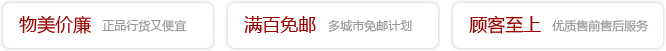
<style>
.page{position:relative;width:666px;height:51px;background:#ffffff}
.page>*{position:absolute;margin:0}
.t1{font:18px "MicrosoftYaHei";color:#990000}
.t2{font:12px "MicrosoftYaHei";color:#999999}
</style>
<div class="page">
<p class="t1" style="left:19px;top:15px;width:72px;height:19px">物美价廉</p>
<p class="t1" style="left:244px;top:16px;width:72px;height:17px">满百免邮</p>
<p class="t1" style="left:469px;top:15px;width:72px;height:19px">顾客至上</p>
<p class="t2" style="left:102px;top:20px;width:85px;height:12px">正品行货又便宜</p>
<p class="t2" style="left:328px;top:19px;width:84px;height:13px">多城市免邮计划</p>
<p class="t2" style="left:552px;top:19px;width:97px;height:13px">优质售前售后服务</p>
</div>
